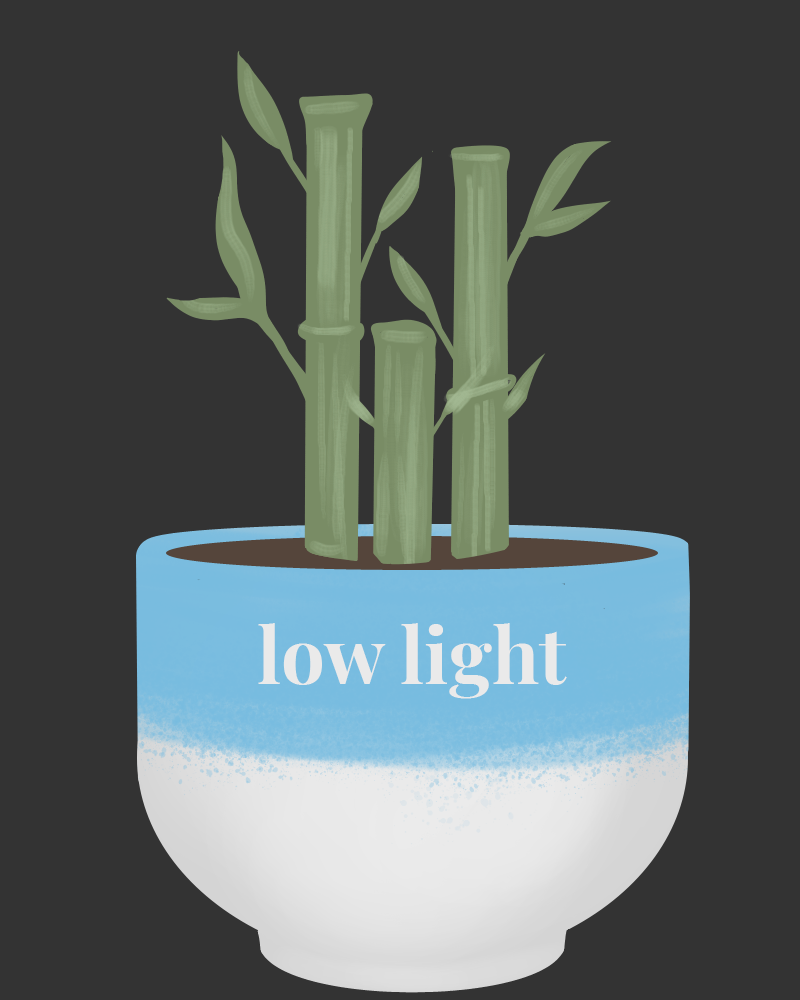
<style>
.page{position:relative;width:800px;height:1000px;background:#333333}
.page>*{position:absolute;margin:0}
.t1{font:77.8px "PlayfairDisplay-Bold";color:#eaeaea}
</style>
<div class="page">
<p class="t1" style="left:258px;top:623px;width:309px;height:76px">low light</p>
</div>
